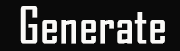
<style>
.page{position:relative;width:180px;height:51px;background:#0a0a0a}
.page>*{position:absolute;margin:0}
.t1{font:48px "AgencyFB-Reg";color:#faf9f7;font-weight:bold}
</style>
<div class="page">
<p class="t1" style="left:20px;top:6px;width:145px;height:38px">Generate</p>
</div>
